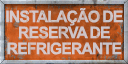
<style>
.page{position:relative;width:128px;height:64px}
.page>*{position:absolute;margin:0}
.t1{font:16px/16px "Arial-BoldMT";letter-spacing:-0.09em;color:#cfc5c7;text-transform:uppercase}
</style>
<div class="page">
<p class="t1" style="left:6px;top:8px;width:117px;height:47px;text-align:center">Instalação de<br>reserva de<br>refrigerante</p>
</div>
